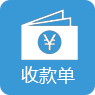
<style>
.page{position:relative;width:95px;height:95px;background:#3998d6}
.page>*{position:absolute;margin:0}
.t1{font:18px "MicrosoftYaHei";color:#ffffff}
</style>
<div class="page">
<p class="t1" style="left:21px;top:66px;width:54px;height:18px">收款单</p>
</div>
